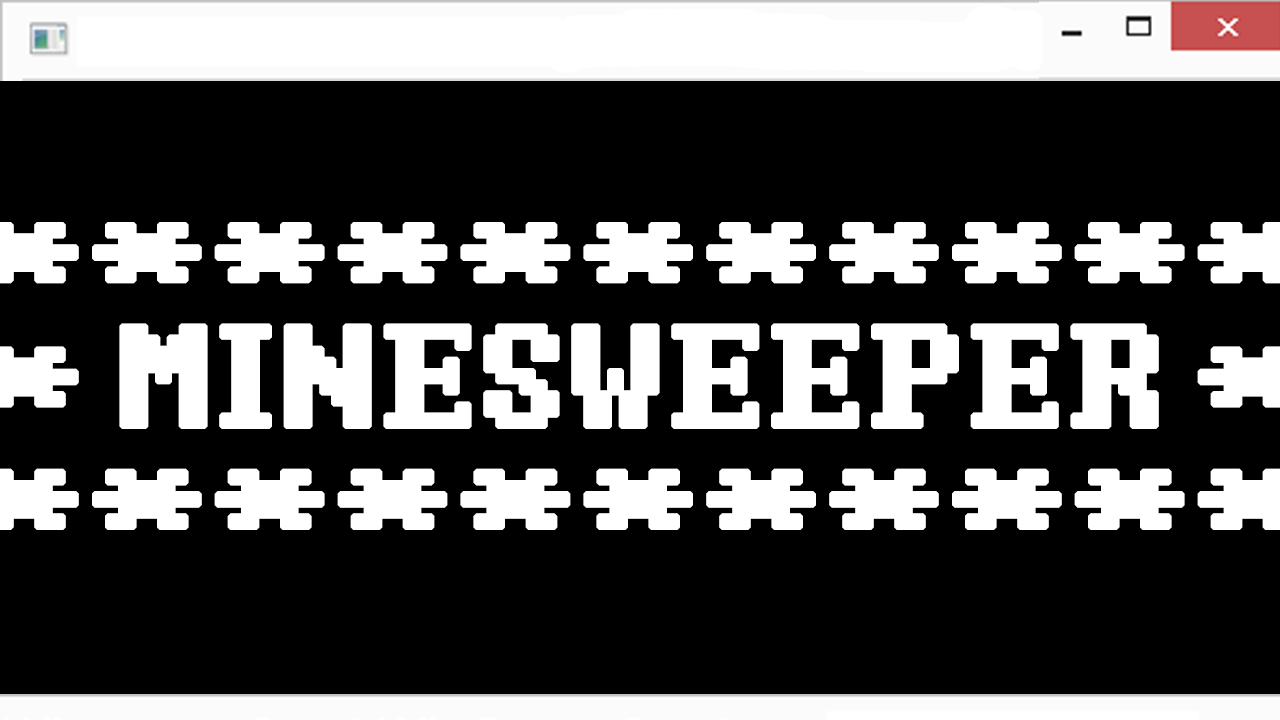
<style>
.page{position:relative;width:1280px;height:720px;background:#000000}
.page>*{position:absolute;margin:0}
.t1{font:178.1px "Windows-Command-Prompt";color:#ffffff;font-weight:bold;scale:1.06 1}
</style>
<div class="page">
<p class="t1" style="left:119px;top:323px;width:1040px;height:106px">MINESWEEPER</p>
</div>
